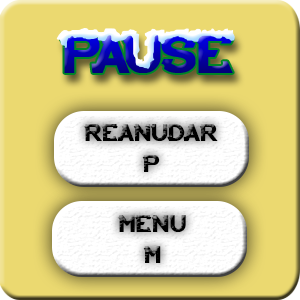
<style>
.page{position:relative;width:300px;height:300px;background:#ebd970}
.page>*{position:absolute;margin:0}
.t1{font:26px "ARCADE";color:#000000}
</style>
<div class="page">
<p class="t1" style="left:84px;top:124px;width:134px;height:48px;text-align:center">reanudar <br>p</p>
<p class="t1" style="left:118px;top:215px;width:68px;height:48px;text-align:center">menu<br>m</p>
</div>
